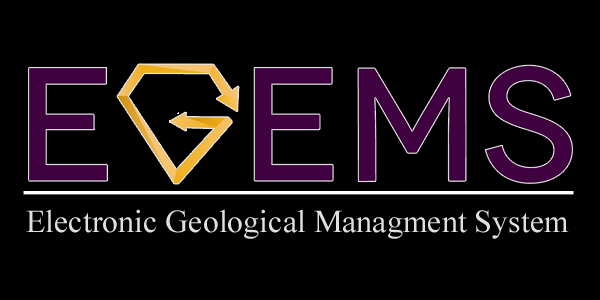
<style>
.page{position:relative;width:600px;height:300px;background:#000000}
.page>*{position:absolute;margin:0}
.t1{font:32px "TimesNewRomanPSMT";color:#dfe0e0}
</style>
<div class="page">
<p class="t1" style="left:26px;top:209px;width:543px;height:30px">Electronic Geological Managment System</p>
</div>
